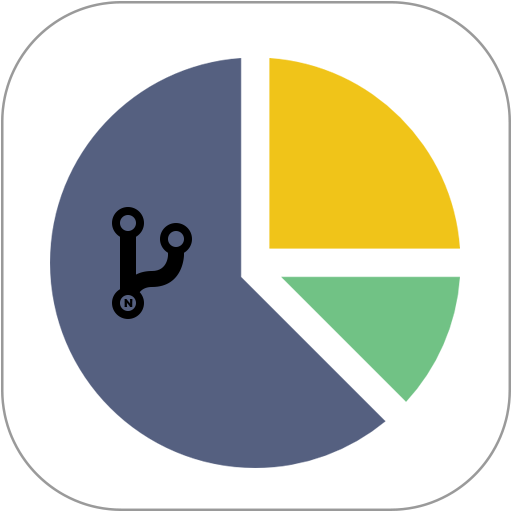
<style>
.page{position:relative;width:512px;height:512px;background:#ffffff}
.page>*{position:absolute;margin:0}
.t1{font:12px "BerlinSansFBDemi-Bold";color:#000000}
</style>
<div class="page">
<p class="t1" style="left:124px;top:299px;width:9px;height:8px">N</p>
</div>
